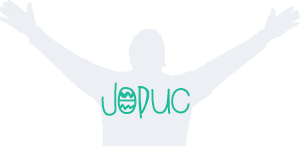
<style>
.page{position:relative;width:300px;height:146px;background:#ffffff}
.page>*{position:absolute;margin:0}
.t1{font:35px "YoungFolks";color:#1abc9c}
</style>
<div class="page">
<p class="t1" style="left:101px;top:82px;width:89px;height:37px">JoPuc</p>
</div>
